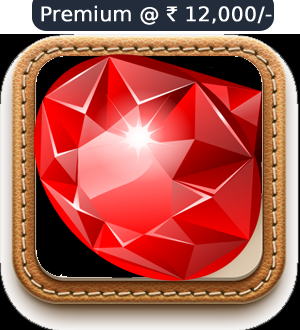
<style>
.page{position:relative;width:300px;height:330px}
.page>*{position:absolute;margin:0}
.t1{font:20px "RupeeForadian";color:#ffffff;font-weight:bold}
</style>
<div class="page">
<p class="t1" style="left:41px;top:5px;width:231px;height:20px">Premium @ ` 12,000/-</p>
</div>
